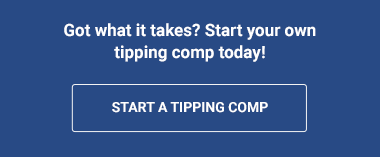
<style>
.page{position:relative;width:380px;height:157px;background:#284a85}
.page>*{position:absolute;margin:0}
.t1{font:17px/22px "Roboto-Bold";color:#ffffff}
.t2{font:14px "Roboto-Bold";color:#ffffff;text-transform:uppercase}
</style>
<div class="page">
<p class="t1" style="left:64px;top:23px;width:252px;height:39px;text-align:center">Got what it takes? Start your own tipping comp today!</p>
<p class="t2" style="left:112px;top:102px;width:156px;height:11px">START A TIPPING COMP</p>
</div>
